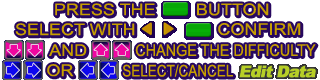
<style>
.page{position:relative;width:320px;height:80px;background:#ffffff}
.page>*{position:absolute;margin:0}
.t1{font:16.2px "ArialMT";color:#c69e01;scale:1.11 1}
.t2{font:16.2px "ArialMT";color:#c69e01;scale:0.89 1}
.t3{font:16.2px "ArialMT";color:#c69e01;scale:0.83 1}
</style>
<div class="page">
<p class="t1" style="left:55px;top:3px;width:100px;height:13px">PRESS THE</p>
<p class="t1" style="left:197px;top:3px;width:72px;height:13px">BUTTON</p>
<p class="t1" style="left:15px;top:23px;width:120px;height:13px">SELECT WITH</p>
<p class="t1" style="left:218px;top:23px;width:83px;height:13px">CONFIRM</p>
<p class="t1" style="left:49px;top:44px;width:38px;height:12px">AND</p>
<p class="t2" style="left:135px;top:44px;width:181px;height:13px">CHANGE THE DIFFICULTY</p>
<p class="t1" style="left:47px;top:64px;width:27px;height:13px">OR</p>
<p class="t3" style="left:122px;top:64px;width:111px;height:13px">SELECT/CANCEL</p>
</div>
